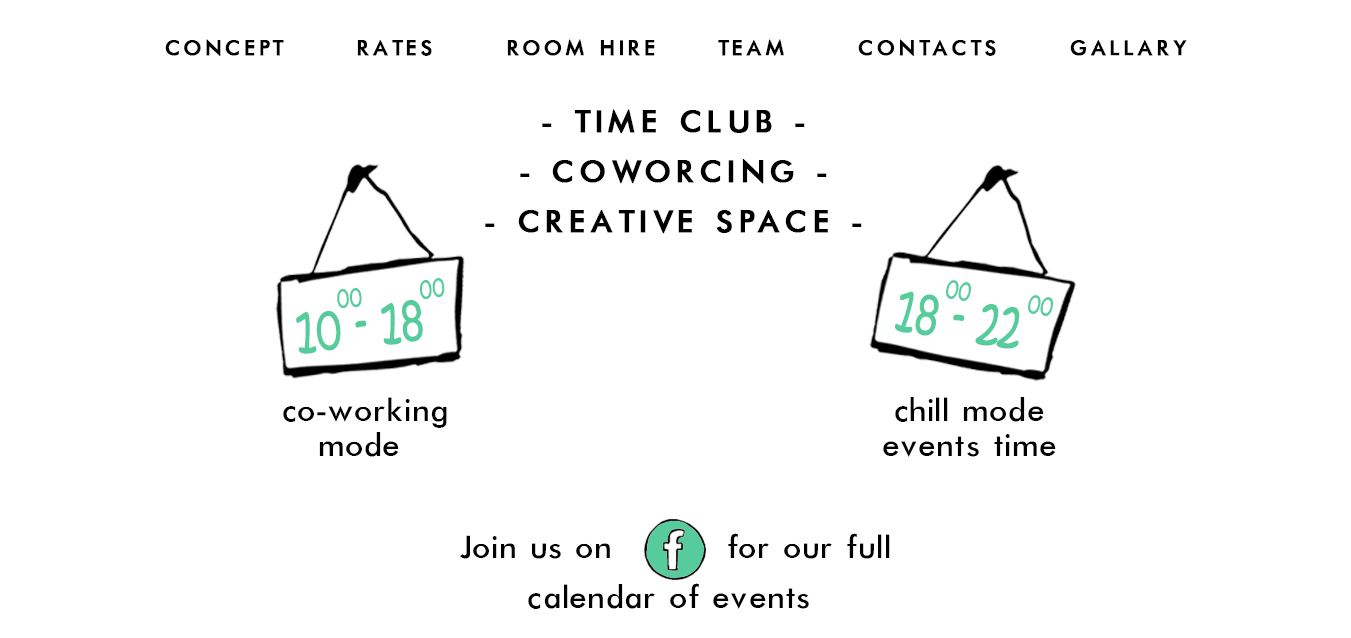
<style>
.page{position:relative;width:1351px;height:638px;background:#ffffff}
.page>*{position:absolute;margin:0}
.t1{font:24px "Futura-Normal";letter-spacing:0.12em;color:#000000;text-transform:uppercase;font-weight:bold}
.t2{font:35px/50px "Futura-Normal";letter-spacing:0.12em;color:#000000;text-transform:uppercase;font-weight:bold}
.t3{font:30px "KristenITC-Regular";color:#56cc9d;scale:0.71 1}
.t4{font:61.1px "KristenITC-Regular";color:#56cc9d;scale:0.72 1}
.t5{font:61.4px "KristenITC-Regular";color:#56cc9d;scale:0.71 1}
.t6{font:36px/35px "Futura-Normal";letter-spacing:0.01em;color:#000000}
.t7{font:36px/50px "Futura-Normal";letter-spacing:0.01em;color:#000000}
</style>
<div class="page">
<p class="t1" style="left:165px;top:39px;width:1022px;height:17px">concept      rates      room hire     team      contacts      gallary</p>
<p class="t2" style="left:485px;top:109px;width:377px;height:125px;text-align:center">- time club -<br>- coworcing -<br>- creative space -</p>
<p class="t3" style="left:337px;top:277px;width:108px;height:32px;rotate:-6deg">00         00</p>
<p class="t3" style="left:945px;top:280px;width:109px;height:37px;rotate:10deg">00         00</p>
<p class="t4" style="left:894px;top:291px;width:126px;height:58px;rotate:9deg">18 - 22</p>
<p class="t5" style="left:296px;top:300px;width:127px;height:54px;rotate:-6deg">10 - 18</p>
<p class="t6" style="left:283px;top:397px;width:164px;height:60px;text-align:center">co-working<br>mode</p>
<p class="t6" style="left:883px;top:397px;width:173px;height:60px;text-align:center">chill mode<br>events time</p>
<p class="t7" style="left:460px;top:533px;width:430px;height:76px;text-align:center">Join us on         for our full<br>calendar of events</p>
</div>
